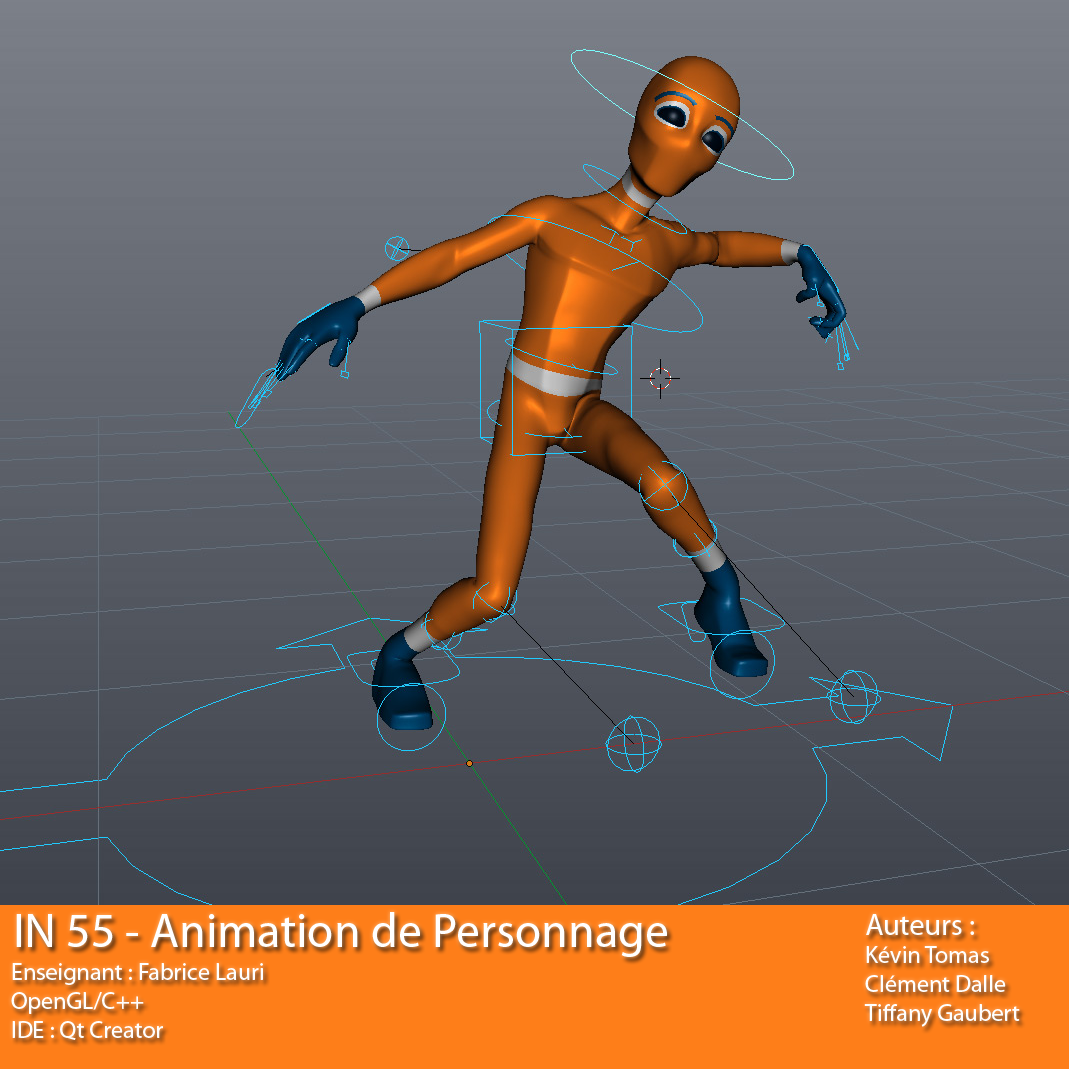
<style>
.page{position:relative;width:1069px;height:1069px}
.page>*{position:absolute;margin:0}
.t1{font:48px "MyriadPro-Regular";color:#ffffff}
.t2{font:24px "MyriadPro-Regular";color:#ffffff}
.t3{font:30px "MyriadPro-Regular";color:#ffffff}
</style>
<div class="page">
<p class="t1" style="left:16px;top:912px;width:651px;height:45px">IN 55 - Animation de Personnage</p>
<p class="t2" style="left:864px;top:914px;width:156px;height:113px"><span class="t3">Auteurs :<br></span>Kévin Tomas<br>Clément Dalle<br>Tiffany Gaubert</p>
<p class="t2" style="left:11px;top:963px;width:252px;height:77px">Enseignant : Fabrice Lauri<br>OpenGL/C++<br>IDE : Qt Creator</p>
</div>
